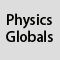
<style>
.page{position:relative;width:60px;height:60px;background:#dddddd}
.page>*{position:absolute;margin:0}
.t1{font:14px "AdobeHeitiStd-Regular";color:#010100}
</style>
<div class="page">
<p class="t1" style="left:6px;top:13px;width:47px;height:29px">Physics<br>Globals</p>
</div>
